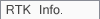
<style>
.page{position:relative;width:100px;height:19px;background:#fafafa}
.page>*{position:absolute;margin:0}
.t1{font:14px "Latha";color:#464646}
</style>
<div class="page">
<p class="t1" style="left:6px;top:4px;width:56px;height:11px">RTK Info.</p>
</div>
